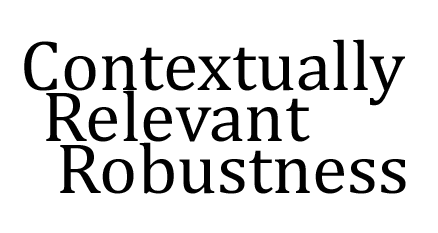
<style>
.page{position:relative;width:438px;height:233px;background:#ffffff}
.page>*{position:absolute;margin:0}
.t1{font:72px "Cambria";color:#000000}
</style>
<div class="page">
<p class="t1" style="left:24px;top:39px;width:381px;height:67px">Contextually</p>
<p class="t1" style="left:46px;top:90px;width:264px;height:52px">Relevant</p>
<p class="t1" style="left:60px;top:142px;width:346px;height:52px">Robustness</p>
</div>
